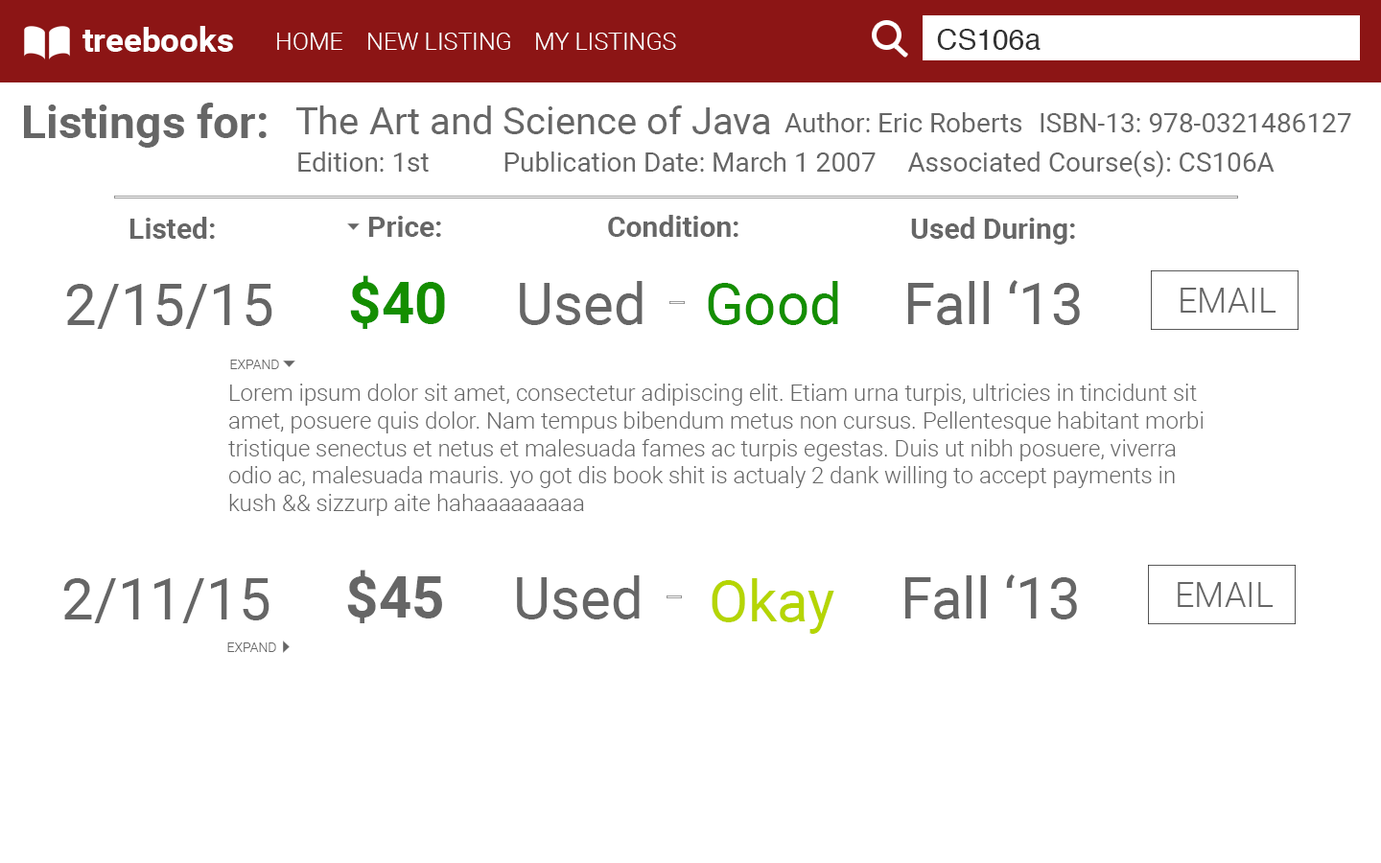
<style>
.page{position:relative;width:1381px;height:863px;background:#ffffff}
.page>*{position:absolute;margin:0}
.t1{font:33.6px "Roboto-Bold";color:#ffffff}
.t2{font:28.8px "Helvetica";color:#313131}
.t3{font:24px "Roboto-Light";color:#ffffff}
.t4{font:46px "Roboto-Bold";color:#666666}
.t5{font:38.4px "Roboto-Regular";color:#666666}
.t6{font:26.9px "Roboto-Regular";color:#666666}
.t7{font:28.8px "Roboto-Bold";color:#666666}
.t8{font:57.6px "Roboto-Bold";color:#148e00}
.t9{font:57.6px "Roboto-Regular";color:#666666}
.t10{font:57.6px "Roboto-Regular";color:#148e00}
.t11{font:34.5px "Roboto-Light";color:#666666}
.t12{font:13.4px "Roboto-Light";color:#666666}
.t13{font:23px "Roboto-Light";color:#666666}
.t14{font:57.6px "Roboto-Bold";color:#666666}
.t15{font:57.6px "Roboto-Regular";color:#b5d503}
</style>
<div class="page">
<p class="t1" style="left:82px;top:26px;width:151px;height:26px">treebooks</p>
<p class="t2" style="left:937px;top:29px;width:104px;height:21px">CS106a</p>
<p class="t3" style="left:277px;top:33px;width:65px;height:17px">HOME</p>
<p class="t3" style="left:368px;top:33px;width:142px;height:17px">NEW LISTING</p>
<p class="t3" style="left:536px;top:33px;width:140px;height:17px">MY LISTINGS</p>
<p class="t4" style="left:24px;top:103px;width:243px;height:45px">Listings for:</p>
<p class="t5" style="left:296px;top:106px;width:474px;height:28px">The Art and Science of Java</p>
<p class="t6" style="left:785px;top:112px;width:238px;height:20px">Author: Eric Roberts</p>
<p class="t6" style="left:1041px;top:113px;width:311px;height:19px">ISBN-13: 978-0321486127</p>
<p class="t6" style="left:298px;top:152px;width:131px;height:20px">Edition: 1st</p>
<p class="t6" style="left:505px;top:152px;width:371px;height:20px">Publication Date: March 1 2007</p>
<p class="t6" style="left:907px;top:151px;width:368px;height:26px">Associated Course(s): CS106A</p>
<p class="t7" style="left:129px;top:217px;width:86px;height:22px">Listed:</p>
<p class="t7" style="left:368px;top:216px;width:73px;height:21px">Price:</p>
<p class="t7" style="left:608px;top:215px;width:131px;height:22px">Condition:</p>
<p class="t7" style="left:911px;top:217px;width:164px;height:28px">Used During:</p>
<p class="t8" style="left:350px;top:275px;width:95px;height:54px">$40</p>
<p class="t9" style="left:520px;top:281px;width:123px;height:44px">Used</p>
<p class="t10" style="left:708px;top:281px;width:130px;height:44px">Good</p>
<p class="t9" style="left:908px;top:280px;width:172px;height:45px">Fall ‘13</p>
<p class="t9" style="left:66px;top:284px;width:206px;height:45px">2/15/15</p>
<p class="t11" style="left:1181px;top:288px;width:96px;height:25px">EMAIL</p>
<p class="t12" style="left:230px;top:360px;width:49px;height:9px">EXPAND</p>
<p class="t13" style="left:228px;top:384px;width:976px;height:132px">Lorem ipsum dolor sit amet, consectetur adipiscing elit. Etiam urna turpis, ultricies in tincidunt sit amet, posuere quis dolor. Nam tempus bibendum metus non cursus. Pellentesque habitant morbi tristique senectus et netus et malesuada fames ac turpis egestas. Duis ut nibh posuere, viverra odio ac, malesuada mauris. yo got dis book shit is actualy 2 dank willing to accept payments in kush &amp;&amp; sizzurp aite hahaaaaaaaaa</p>
<p class="t14" style="left:347px;top:570px;width:95px;height:53px">$45</p>
<p class="t9" style="left:63px;top:578px;width:207px;height:45px">2/11/15</p>
<p class="t9" style="left:517px;top:576px;width:123px;height:44px">Used</p>
<p class="t15" style="left:712px;top:578px;width:123px;height:56px">Okay</p>
<p class="t9" style="left:905px;top:575px;width:172px;height:45px">Fall ‘13</p>
<p class="t11" style="left:1178px;top:582px;width:96px;height:25px">EMAIL</p>
<p class="t12" style="left:227px;top:643px;width:49px;height:9px">EXPAND</p>
</div>
